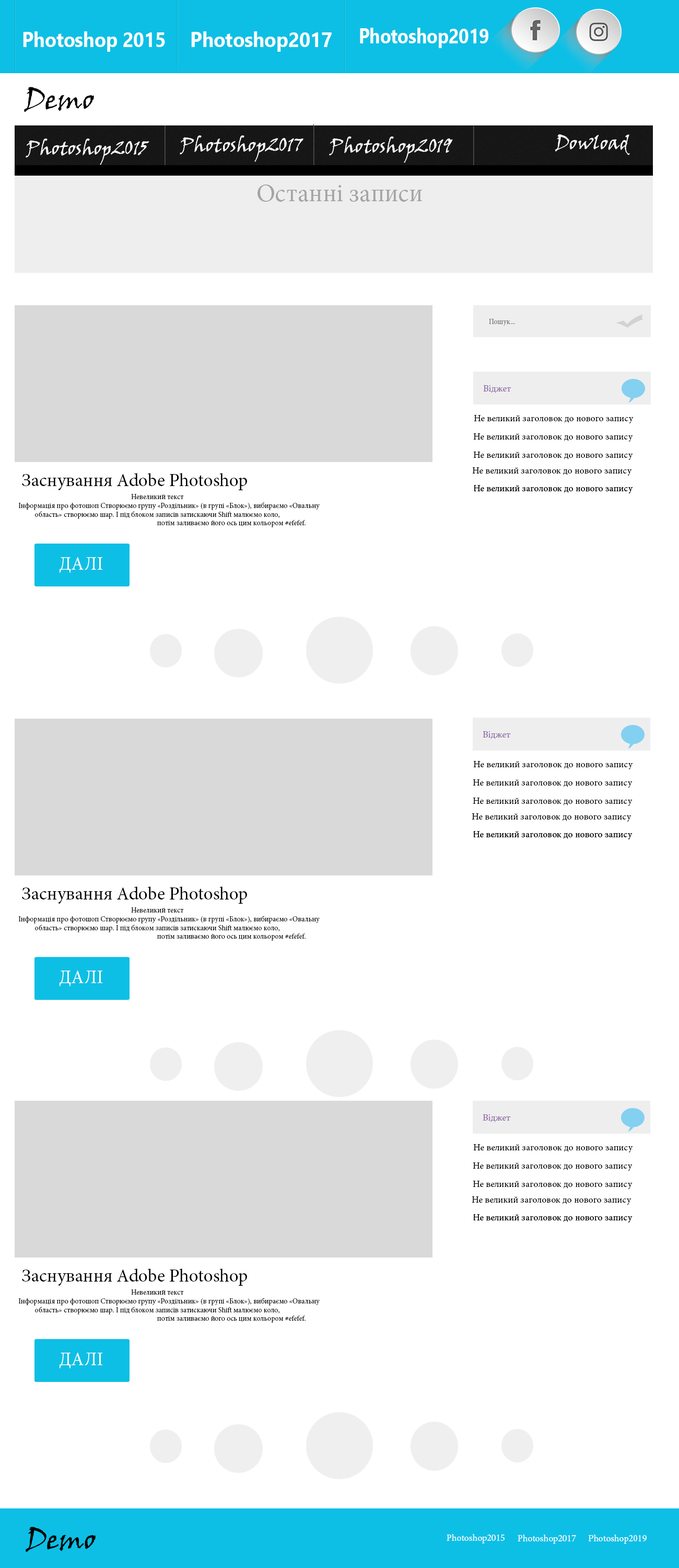
<style>
.page{position:relative;width:679px;height:1568px;background:#ffffff}
.page>*{position:absolute;margin:0}
.t1{font:20.9px "SegoeUI-Bold";color:#ffffff;scale:0.84 1}
.t2{font:20.9px "SegoeUI-Bold";color:#ffffff;scale:0.9 1}
.t3{font:20.9px "SegoeUI-Bold";color:#ffffff;scale:0.92 1}
.t4{font:27.9px "VinerHandITC";color:#000000}
.t5{font:18.8px "VinerHandITC";color:#fefefe}
.t6{font:25.1px "MinionPro-Regular";color:#a4a4a4}
.t7{font:7.3px "MinionPro-Regular";color:#737272}
.t8{font:9.4px "MinionPro-Regular";color:#8e69a4}
.t9{font:9.4px "MinionPro-Regular";color:#000000}
.t10{font:18.3px "MinionPro-Regular";color:#000000}
.t11{font:7.3px "MinionPro-Regular";color:#000000}
.t12{font:18.8px "MinionPro-Regular";color:#ffffff}
.t13{font:9.4px "MinionPro-Regular";color:#ffffff}
</style>
<div class="page">
<p class="t1" style="left:360px;top:28px;width:129px;height:20px">Photoshop2019</p>
<p class="t2" style="left:23px;top:31px;width:142px;height:21px">Photoshop 2015</p>
<p class="t3" style="left:191px;top:31px;width:141px;height:21px">Photoshop2017</p>
<p class="t4" style="left:24px;top:87px;width:70px;height:25px">Demo</p>
<p class="t5" style="left:180px;top:135px;width:124px;height:27px">Photoshop2017</p>
<p class="t5" style="left:329px;top:136px;width:124px;height:27px">Photoshop2019</p>
<p class="t5" style="left:556px;top:134px;width:74px;height:21px">Dowload</p>
<p class="t5" style="left:26px;top:139px;width:123px;height:26px">Photoshop2015</p>
<p class="t6" style="left:258px;top:185px;width:164px;height:17px">Останні записи</p>
<p class="t7" style="left:489px;top:319px;width:26px;height:7px">Пошук...</p>
<p class="t8" style="left:483px;top:385px;width:28px;height:8px">Віджет</p>
<p class="t9" style="left:474px;top:415px;width:160px;height:8px">Не великий заголовок до нового запису</p>
<p class="t9" style="left:474px;top:433px;width:159px;height:9px">Не великий заголовок до нового запису</p>
<p class="t9" style="left:474px;top:452px;width:159px;height:8px">Не великий заголовок до нового запису</p>
<p class="t10" style="left:22px;top:473px;width:225px;height:17px">Заснування Adobe Photoshop</p>
<p class="t9" style="left:472px;top:467px;width:160px;height:9px">Не великий заголовок до нового запису</p>
<p class="t11" style="left:18px;top:494px;width:302px;height:33px;text-align:center">Невеликий текст<br>              Інформація про фотошоп Створюємо групу «Роздільник» (в групі «Блок»), вибираємо «Овальну<br>область» створюємо шар. І під блоком записів затискаючи Shift малюємо коло,<br>потім заливаємо його ось цим кольором #efefef.</p>
<p class="t12" style="left:60px;top:557px;width:43px;height:16px">ДАЛІ</p>
<p class="t8" style="left:483px;top:731px;width:28px;height:8px">Віджет</p>
<p class="t9" style="left:474px;top:761px;width:159px;height:8px">Не великий заголовок до нового запису</p>
<p class="t9" style="left:473px;top:779px;width:160px;height:9px">Не великий заголовок до нового запису</p>
<p class="t9" style="left:473px;top:798px;width:160px;height:8px">Не великий заголовок до нового запису</p>
<p class="t9" style="left:472px;top:813px;width:160px;height:9px">Не великий заголовок до нового запису</p>
<p class="t10" style="left:22px;top:886px;width:225px;height:18px">Заснування Adobe Photoshop</p>
<p class="t11" style="left:18px;top:907px;width:302px;height:34px;text-align:center">Невеликий текст<br>              Інформація про фотошоп Створюємо групу «Роздільник» (в групі «Блок»), вибираємо «Овальну<br>область» створюємо шар. І під блоком записів затискаючи Shift малюємо коло,<br>потім заливаємо його ось цим кольором #efefef.</p>
<p class="t12" style="left:60px;top:971px;width:43px;height:15px">ДАЛІ</p>
<p class="t8" style="left:483px;top:1114px;width:28px;height:8px">Віджет</p>
<p class="t9" style="left:474px;top:1144px;width:159px;height:8px">Не великий заголовок до нового запису</p>
<p class="t9" style="left:473px;top:1162px;width:160px;height:9px">Не великий заголовок до нового запису</p>
<p class="t9" style="left:473px;top:1181px;width:160px;height:8px">Не великий заголовок до нового запису</p>
<p class="t9" style="left:472px;top:1196px;width:160px;height:9px">Не великий заголовок до нового запису</p>
<p class="t10" style="left:22px;top:1269px;width:225px;height:17px">Заснування Adobe Photoshop</p>
<p class="t11" style="left:18px;top:1289px;width:302px;height:34px;text-align:center">Невеликий текст<br>              Інформація про фотошоп Створюємо групу «Роздільник» (в групі «Блок»), вибираємо «Овальну<br>область» створюємо шар. І під блоком записів затискаючи Shift малюємо коло,<br>потім заливаємо його ось цим кольором #efefef.</p>
<p class="t12" style="left:60px;top:1353px;width:43px;height:15px">ДАЛІ</p>
<p class="t13" style="left:447px;top:1534px;width:58px;height:9px">Photoshop2015</p>
<p class="t13" style="left:518px;top:1535px;width:59px;height:9px">Photoshop2017</p>
<p class="t13" style="left:589px;top:1535px;width:58px;height:9px">Photoshop2019</p>
</div>
